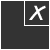
<style>
.page{position:relative;width:50px;height:50px;background:#333333}
.page>*{position:absolute;margin:0}
.t1{font:24px "Airstream";color:#ffffff}
</style>
<div class="page">
<p class="t1" style="left:29px;top:5px;width:17px;height:15px">X</p>
</div>
